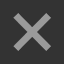
<style>
.page{position:relative;width:64px;height:64px;background:#333333}
.page>*{position:absolute;margin:0}
.t1{font:52px "SegoeUISymbol";color:#9a9a9a}
</style>
<div class="page">
<p class="t1" style="left:13px;top:13px;width:38px;height:38px">✖</p>
</div>
